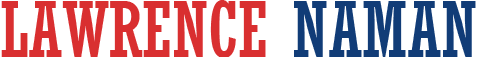
<style>
.page{position:relative;width:482px;height:57px;background:#ffffff}
.page>*{position:absolute;margin:0}
.t1{font:75.6px "Rockwell-Condensed";letter-spacing:-0.005em;color:#d92f30}
.t2{font:75.6px "Rockwell-Condensed";letter-spacing:-0.005em;color:#113c77}
</style>
<div class="page">
<p class="t1" style="left:1px;top:0px;width:475px;height:57px">LAWRENCE <span class="t2">NAMAN</span></p>
</div>
